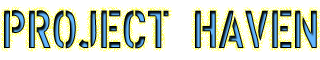
<style>
.page{position:relative;width:320px;height:60px;background:#ffffff}
.page>*{position:absolute;margin:0}
.t1{font:52.7px "XXIISTRAIGHT-ARMY"}
</style>
<div class="page">
<p class="t1" style="left:4px;top:10px;width:313px;height:39px">PROJECT HAVEN</p>
</div>
